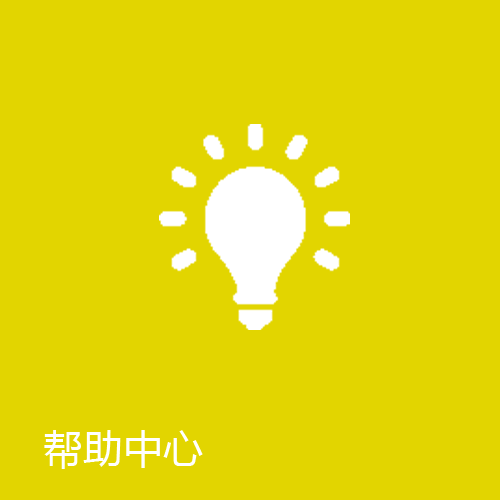
<style>
.page{position:relative;width:500px;height:500px;background:#e2d500}
.page>*{position:absolute;margin:0}
.t1{font:40px "MicrosoftYaHei";color:#ffffff}
</style>
<div class="page">
<p class="t1" style="left:44px;top:430px;width:159px;height:39px">帮助中心</p>
</div>
